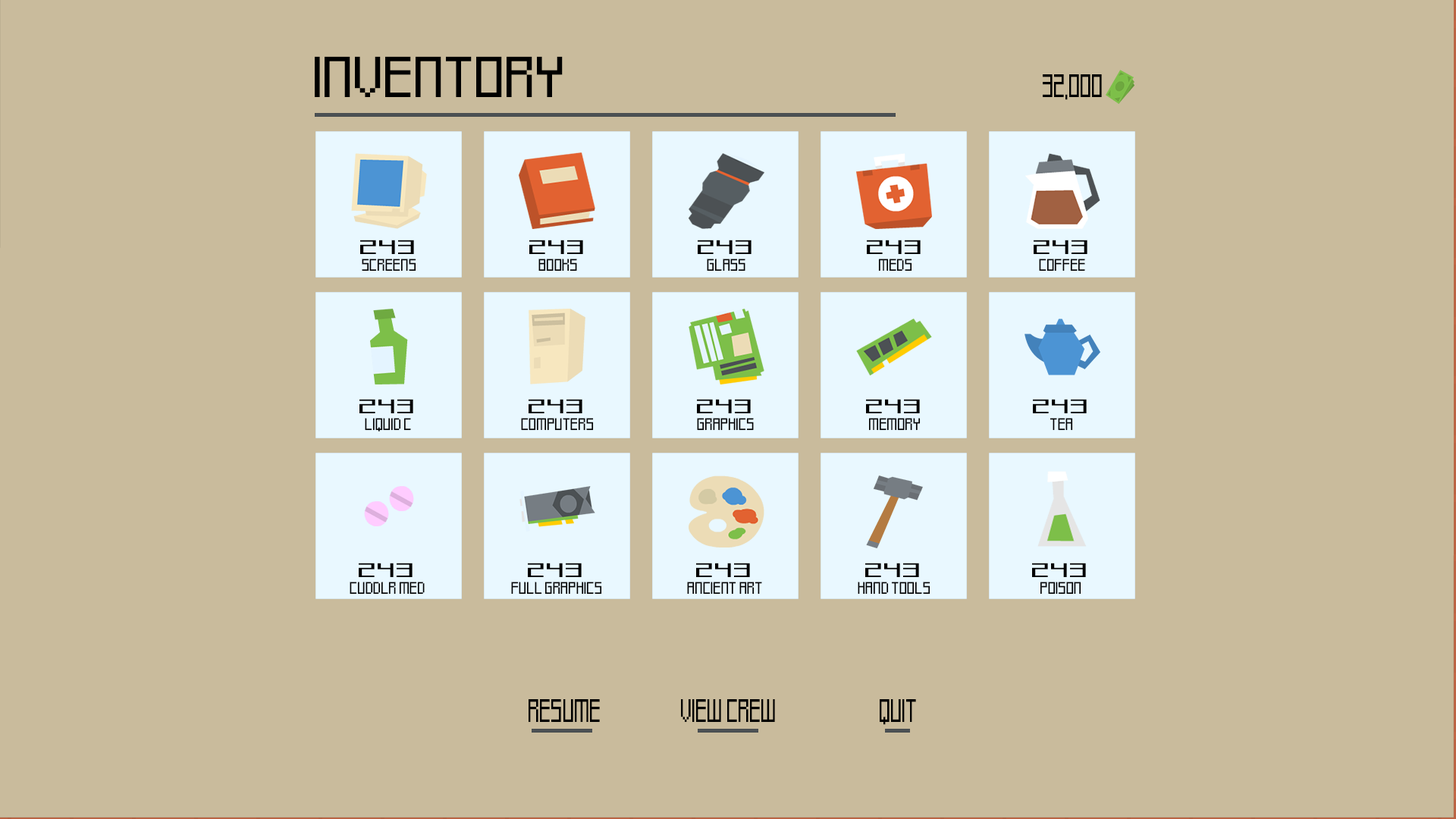
<style>
.page{position:relative;width:1456px;height:819px;background:#c9bb9c}
.page>*{position:absolute;margin:0}
.t1{font:71.7px "Kenney-High-Square";color:#000000;scale:1.13 1}
.t2{font:40.4px "Kenney-High-Square";color:#000000;scale:0.76 1}
.t3{font:24.7px "Kenney-High-Square";color:#000000;scale:2.03 1}
.t4{font:20.8px "Kenney-High-Square";color:#000000}
</style>
<div class="page">
<p class="t1" style="left:315px;top:56px;width:248px;height:41px">Inventory</p>
<p class="t2" style="left:1043px;top:74px;width:59px;height:26px">32,000</p>
<p class="t3" style="left:360px;top:240px;width:54px;height:14px">243</p>
<p class="t3" style="left:529px;top:240px;width:54px;height:14px">243</p>
<p class="t3" style="left:698px;top:240px;width:53px;height:14px">243</p>
<p class="t3" style="left:867px;top:240px;width:54px;height:14px">243</p>
<p class="t3" style="left:1034px;top:240px;width:53px;height:14px">243</p>
<p class="t4" style="left:362px;top:259px;width:54px;height:12px">Screens</p>
<p class="t4" style="left:538px;top:259px;width:39px;height:12px">Books</p>
<p class="t4" style="left:707px;top:259px;width:38px;height:12px">Glass</p>
<p class="t4" style="left:878px;top:259px;width:34px;height:12px">Meds</p>
<p class="t4" style="left:1039px;top:259px;width:46px;height:12px">Coffee</p>
<p class="t3" style="left:359px;top:399px;width:54px;height:14px">243</p>
<p class="t3" style="left:529px;top:399px;width:53px;height:14px">243</p>
<p class="t3" style="left:697px;top:399px;width:54px;height:14px">243</p>
<p class="t3" style="left:866px;top:399px;width:54px;height:14px">243</p>
<p class="t3" style="left:1033px;top:399px;width:54px;height:14px">243</p>
<p class="t4" style="left:365px;top:418px;width:46px;height:13px">Liquid C</p>
<p class="t4" style="left:521px;top:418px;width:73px;height:13px">Computers</p>
<p class="t4" style="left:697px;top:418px;width:57px;height:13px">GRaphics</p>
<p class="t4" style="left:869px;top:418px;width:52px;height:13px">Memory</p>
<p class="t4" style="left:1050px;top:418px;width:23px;height:13px">Tea</p>
<p class="t3" style="left:359px;top:563px;width:54px;height:14px">243</p>
<p class="t3" style="left:528px;top:563px;width:54px;height:14px">243</p>
<p class="t3" style="left:696px;top:563px;width:54px;height:14px">243</p>
<p class="t3" style="left:865px;top:563px;width:54px;height:14px">243</p>
<p class="t3" style="left:1032px;top:563px;width:54px;height:14px">243</p>
<p class="t4" style="left:350px;top:582px;width:75px;height:13px">Cuddlr Med</p>
<p class="t4" style="left:511px;top:582px;width:91px;height:13px">Full Graphics</p>
<p class="t4" style="left:687px;top:582px;width:75px;height:13px">Ancient Art</p>
<p class="t4" style="left:858px;top:582px;width:72px;height:13px">Hand Tools</p>
<p class="t4" style="left:1040px;top:582px;width:41px;height:13px">Poison</p>
<p class="t2" style="left:529px;top:699px;width:71px;height:23px">Resume</p>
<p class="t2" style="left:681px;top:699px;width:94px;height:23px">View Crew</p>
<p class="t2" style="left:880px;top:699px;width:36px;height:26px">Quit</p>
</div>
